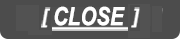
<style>
.page{position:relative;width:180px;height:39px;background:#4c4c4c}
.page>*{position:absolute;margin:0}
.t1{font:25px "ArialNarrow-BoldItalic";color:#ffffff}
</style>
<div class="page">
<p class="t1" style="left:54px;top:6px;width:71px;height:20px">CLOSE</p>
</div>
